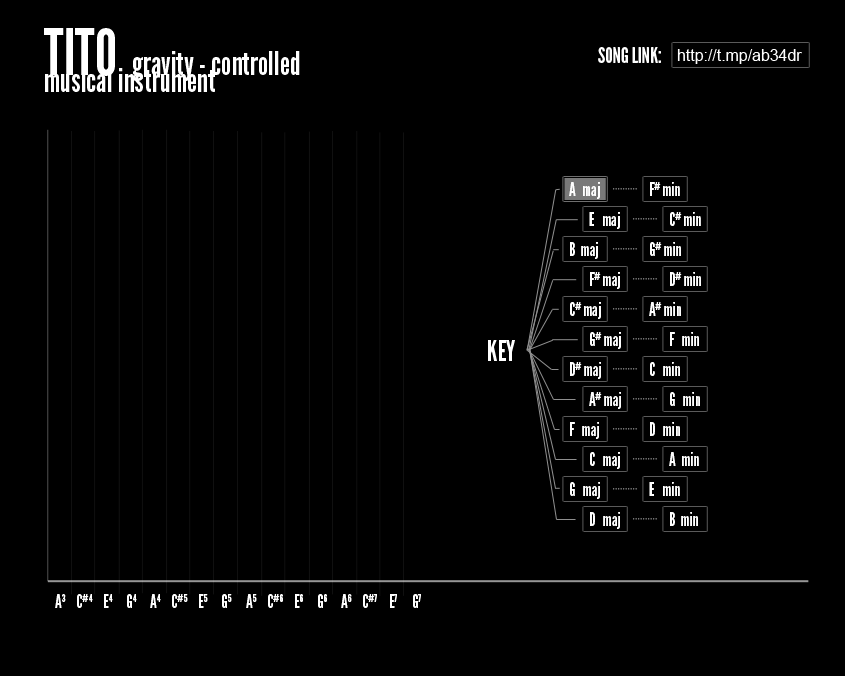
<style>
.page{position:relative;width:845px;height:676px;background:#000000}
.page>*{position:absolute;margin:0}
.t1{font:32.2px/17.3px "LeagueGothic";color:#ffffff}
.t2{font:62.6px/17.3px "LeagueGothic";color:#ffffff}
.t3{font:36px "LeagueGothic";color:#ffffff}
.t4{font:27.3px "ArialMT";color:#ffffff}
.t5{font:18px "LeagueGothic";color:#ffffff}
.t6{font:48px "LeagueGothic";color:#ffffff}
</style>
<div class="page">
<p class="t1" style="left:44px;top:28px;width:256px;height:64px;text-align:justify"><span class="t2">TITO </span> gravity - controlled<br>musical instrument</p>
<p class="t3" style="left:598px;top:47px;width:63px;height:16px">SONG LINK:</p>
<p class="t4" style="left:677px;top:49px;width:125px;height:15px">http://t.mp/ab34dr</p>
<p class="t5" style="left:569px;top:182px;width:31px;height:17px">A  maj</p>
<p class="t5" style="left:650px;top:182px;width:30px;height:14px">F# min</p>
<p class="t5" style="left:589px;top:212px;width:31px;height:17px">E    maj</p>
<p class="t5" style="left:670px;top:212px;width:31px;height:14px">C# min</p>
<p class="t5" style="left:570px;top:242px;width:28px;height:17px">B   maj</p>
<p class="t5" style="left:650px;top:242px;width:31px;height:14px">G# min</p>
<p class="t5" style="left:590px;top:272px;width:30px;height:17px">F# maj</p>
<p class="t5" style="left:670px;top:272px;width:31px;height:14px">D# min</p>
<p class="t5" style="left:570px;top:302px;width:31px;height:17px">C# maj</p>
<p class="t5" style="left:649px;top:302px;width:32px;height:14px">A# min</p>
<p class="t6" style="left:488px;top:340px;width:27px;height:21px">KEY</p>
<p class="t5" style="left:590px;top:332px;width:31px;height:17px">G# maj</p>
<p class="t5" style="left:670px;top:332px;width:29px;height:14px">F   min</p>
<p class="t5" style="left:570px;top:362px;width:31px;height:17px">D# maj</p>
<p class="t5" style="left:650px;top:362px;width:30px;height:14px">C   min</p>
<p class="t5" style="left:589px;top:392px;width:32px;height:17px">A# maj</p>
<p class="t5" style="left:670px;top:392px;width:30px;height:14px">G   min</p>
<p class="t5" style="left:570px;top:422px;width:29px;height:17px">F   maj</p>
<p class="t5" style="left:650px;top:422px;width:30px;height:14px">D   min</p>
<p class="t5" style="left:590px;top:452px;width:30px;height:17px">C   maj</p>
<p class="t5" style="left:669px;top:452px;width:30px;height:14px">A   min</p>
<p class="t5" style="left:570px;top:482px;width:30px;height:17px">G   maj</p>
<p class="t5" style="left:649px;top:482px;width:31px;height:14px">E    min</p>
<p class="t5" style="left:590px;top:512px;width:30px;height:17px">D   maj</p>
<p class="t5" style="left:670px;top:512px;width:28px;height:14px">B   min</p>
<p class="t5" style="left:55px;top:594px;width:11px;height:14px">A3</p>
<p class="t5" style="left:77px;top:594px;width:16px;height:14px">C#4</p>
<p class="t5" style="left:104px;top:594px;width:9px;height:14px">E4</p>
<p class="t5" style="left:127px;top:594px;width:10px;height:14px">G4</p>
<p class="t5" style="left:150px;top:594px;width:11px;height:14px">A4</p>
<p class="t5" style="left:172px;top:594px;width:16px;height:14px">C#5</p>
<p class="t5" style="left:199px;top:594px;width:9px;height:14px">E5</p>
<p class="t5" style="left:222px;top:594px;width:10px;height:14px">G5</p>
<p class="t5" style="left:246px;top:594px;width:11px;height:14px">A5</p>
<p class="t5" style="left:268px;top:594px;width:15px;height:14px">C#6</p>
<p class="t5" style="left:295px;top:594px;width:8px;height:14px">E6</p>
<p class="t5" style="left:318px;top:594px;width:9px;height:14px">G6</p>
<p class="t5" style="left:341px;top:594px;width:11px;height:14px">A6</p>
<p class="t5" style="left:363px;top:594px;width:14px;height:14px">C#7</p>
<p class="t5" style="left:390px;top:594px;width:7px;height:14px">E7</p>
<p class="t5" style="left:413px;top:594px;width:8px;height:14px">G7</p>
</div>
